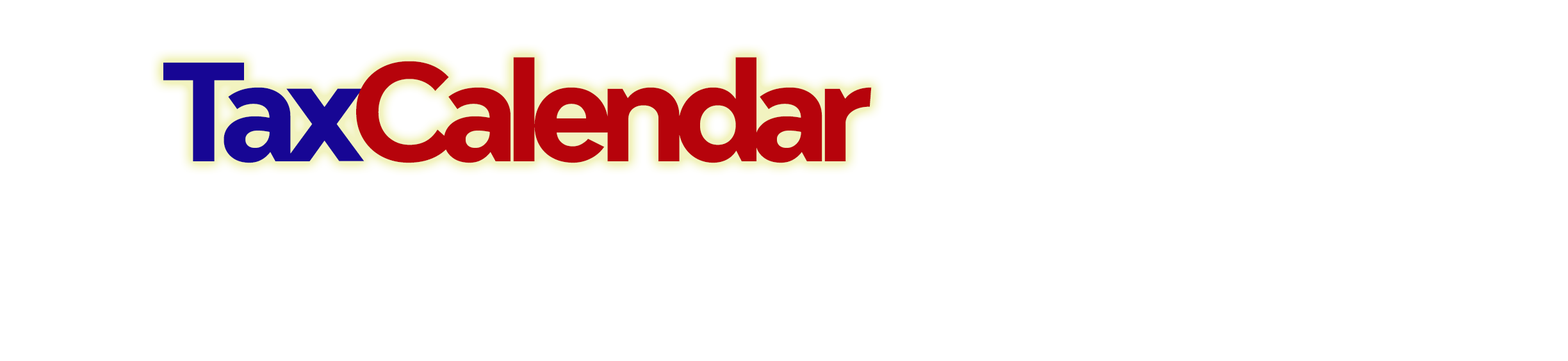
<style>
.page{position:relative;width:1568px;height:361px;background:#ffffff}
.page>*{position:absolute;margin:0}
.t1{font:133.4px "Adlinnaka-BoldDemo";letter-spacing:-0.1em;color:#b6030b}
.t2{font:133.4px "Adlinnaka-BoldDemo";letter-spacing:-0.1em;color:#170694}
</style>
<div class="page">
<p class="t1" style="left:163px;top:57px;width:709px;height:106px"><span class="t2">Tax</span>Calendar</p>
</div>
